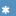
<style>
.page{position:relative;width:16px;height:16px;background:#5690be}
.page>*{position:absolute;margin:0}
.t1{font:18.8px "AndaleMono";letter-spacing:0.05em;color:#ffffff;font-weight:bold}
</style>
<div class="page">
<p class="t1" style="left:2px;top:6px;width:8px;height:8px">*</p>
</div>
